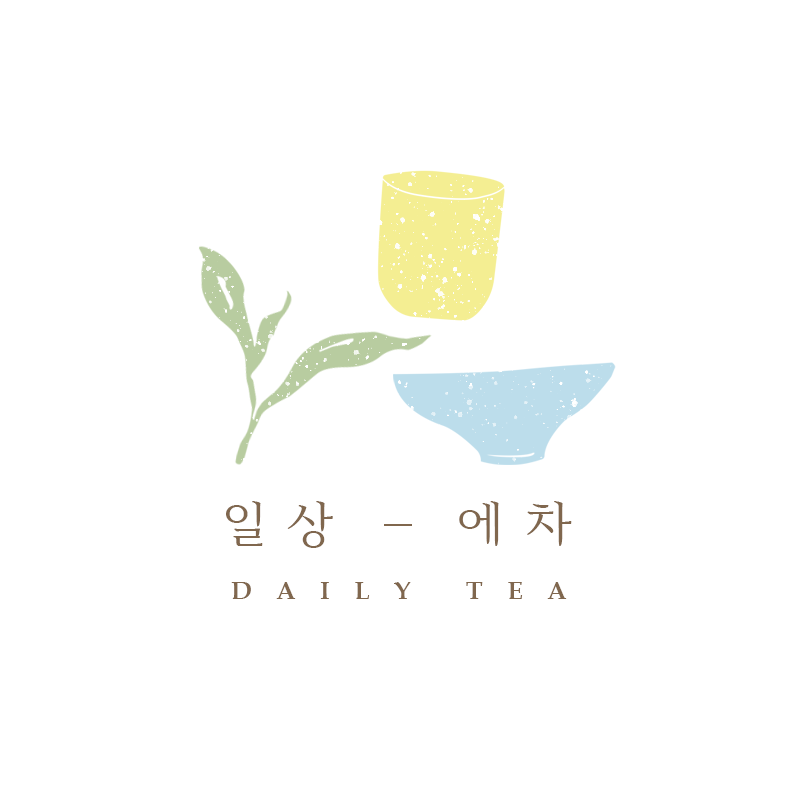
<style>
.page{position:relative;width:800px;height:800px;background:#ffffff}
.page>*{position:absolute;margin:0}
.t1{font:50px "AritaBuriKRMedium";letter-spacing:0.4em;color:#80674e}
.t2{font:25px "BookAntiqua-Bold";letter-spacing:0.98em;color:#80674e}
</style>
<div class="page">
<p class="t1" style="left:226px;top:501px;width:346px;height:47px">일상   에차</p>
<p class="t2" style="left:231px;top:582px;width:336px;height:17px">DAILY TEA</p>
</div>
